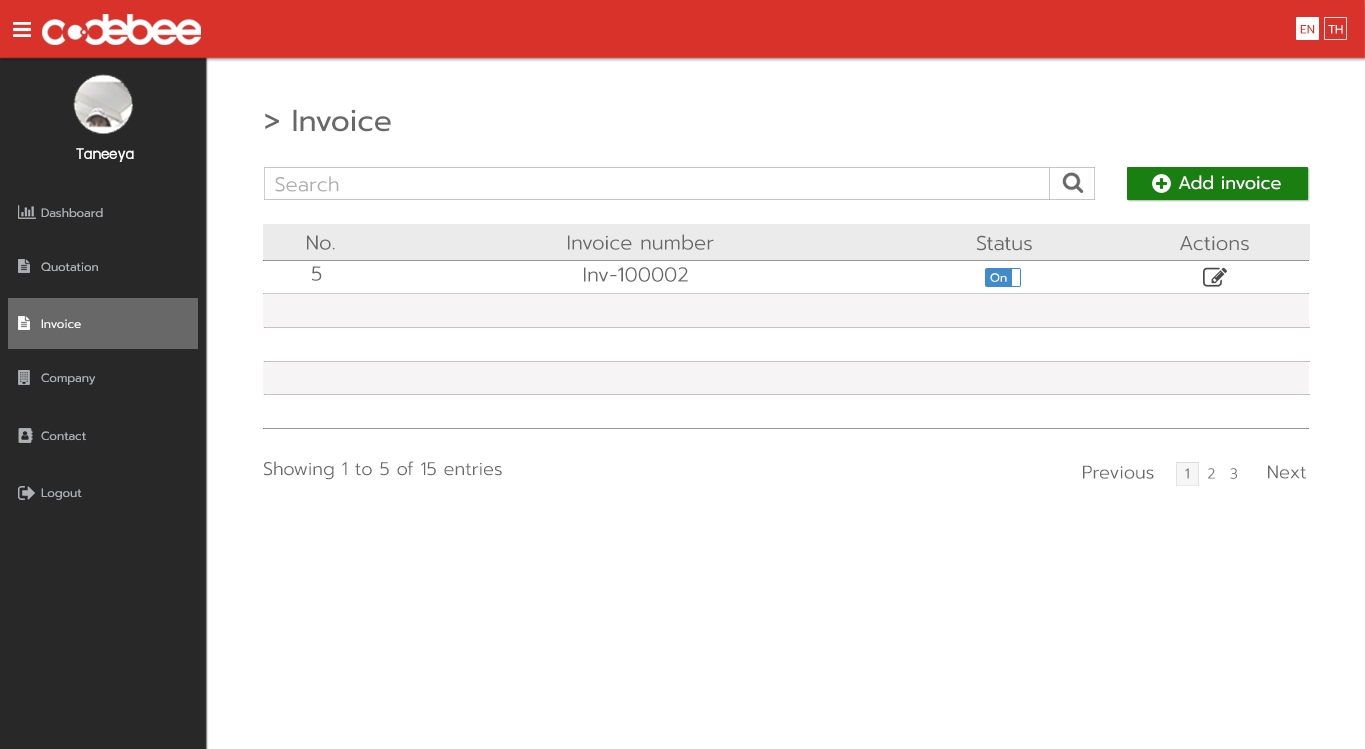
<style>
.page{position:relative;width:1365px;height:749px;background:#ffffff}
.page>*{position:absolute;margin:0}
.t1{font:12px "Prompt-Regular";color:#d8322b}
.t2{font:12px "Prompt-Regular";color:#ffffff}
.t3{font:30px "Prompt-Regular";color:#686868}
.t4{font:18px "supermarket";color:#ffffff}
.t5{font:20px "Prompt-Light";color:#acacac}
.t6{font:18px "Prompt-Regular";color:#ffffff}
.t7{font:12px "Prompt-Regular";color:#aeb2b7}
.t8{font:20px "Prompt-Light";color:#686868}
.t9{font:18px "Prompt-Light";color:#686868}
.t10{font:14px "Prompt-Light";color:#686868}
</style>
<div class="page">
<p class="t1" style="left:1300px;top:25px;width:15px;height:9px">EN</p>
<p class="t2" style="left:1328px;top:25px;width:15px;height:9px">TH</p>
<p class="t3" style="left:265px;top:109px;width:126px;height:23px">&gt; Invoice</p>
<p class="t4" style="left:76px;top:148px;width:58px;height:14px">Taneeya</p>
<p class="t5" style="left:275px;top:176px;width:64px;height:16px">Search</p>
<p class="t6" style="left:1178px;top:175px;width:103px;height:15px">Add invoice</p>
<p class="t7" style="left:41px;top:208px;width:62px;height:10px">Dashboard</p>
<p class="t8" style="left:307px;top:235px;width:28px;height:15px">No.</p>
<p class="t8" style="left:568px;top:234px;width:146px;height:16px">Invoice number</p>
<p class="t8" style="left:977px;top:235px;width:55px;height:16px">Status</p>
<p class="t8" style="left:1180px;top:236px;width:69px;height:15px">Actions</p>
<p class="t7" style="left:41px;top:262px;width:57px;height:10px">Quotation</p>
<p class="t8" style="left:312px;top:266px;width:10px;height:15px">5</p>
<p class="t8" style="left:584px;top:267px;width:104px;height:15px">Inv-100002</p>
<p class="t2" style="left:990px;top:273px;width:17px;height:9px">On</p>
<p class="t2" style="left:41px;top:319px;width:40px;height:10px">Invoice</p>
<p class="t7" style="left:41px;top:373px;width:55px;height:12px">Company</p>
<p class="t7" style="left:41px;top:431px;width:45px;height:10px">Contact</p>
<p class="t9" style="left:264px;top:461px;width:238px;height:19px">Showing 1 to 5 of 15 entries</p>
<p class="t9" style="left:1083px;top:465px;width:71px;height:14px">Previous</p>
<p class="t10" style="left:1185px;top:468px;width:4px;height:11px">1</p>
<p class="t10" style="left:1208px;top:468px;width:7px;height:11px">2</p>
<p class="t10" style="left:1230px;top:468px;width:7px;height:11px">3</p>
<p class="t9" style="left:1268px;top:465px;width:38px;height:14px">Next</p>
<p class="t7" style="left:41px;top:488px;width:41px;height:12px">Logout</p>
</div>
